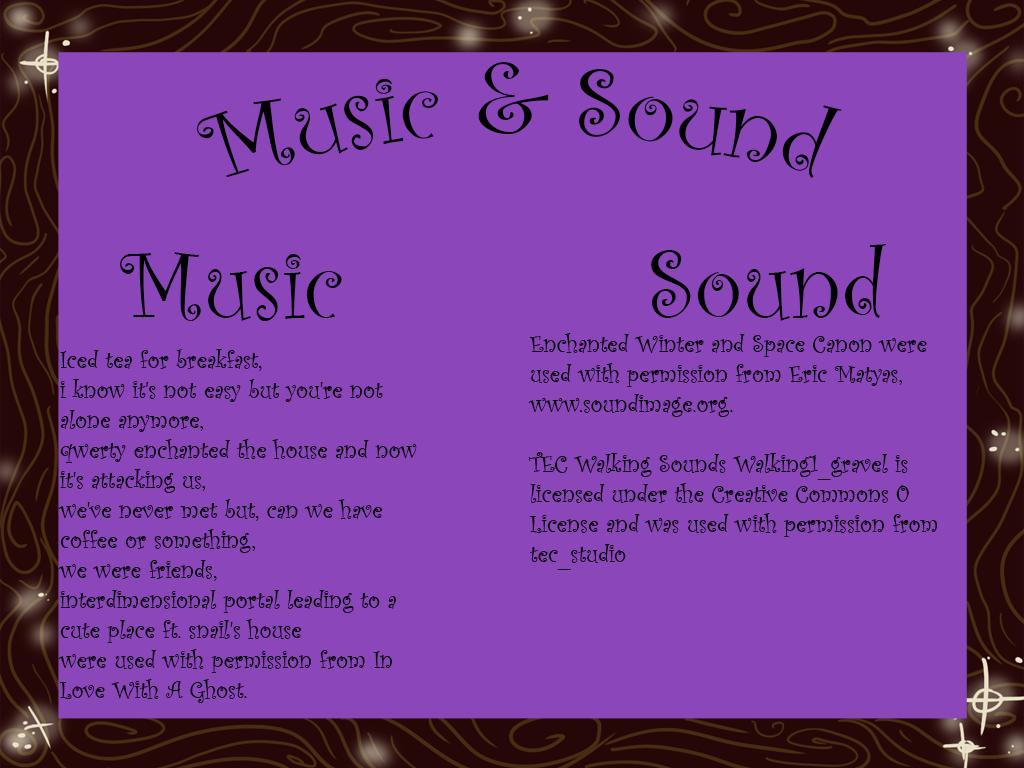
<style>
.page{position:relative;width:1024px;height:768px;background:#8b47ba}
.page>*{position:absolute;margin:0}
.t1{font:100px "CurlzMT";color:#000000}
.t2{font:25px "CurlzMT";color:#000000}
</style>
<div class="page">
<p class="t1" style="left:196px;top:62px;width:646px;height:116px">Music &amp; Sound</p>
<p class="t1" style="left:651px;top:244px;width:236px;height:77px">Sound</p>
<p class="t1" style="left:120px;top:252px;width:222px;height:69px">Music</p>
<p class="t2" style="left:528px;top:333px;width:409px;height:237px">Enchanted Winter and Space Canon were used with permission from Eric Matyas, www.soundimage.org.<br><br>TEC Walking Sounds Walking1_gravel is licensed under the Creative Commons 0 License and was used with permission from tec_studio</p>
<p class="t2" style="left:58px;top:349px;width:359px;height:354px">Iced tea for breakfast, <br>i know it's not easy but you're not alone anymore, <br>qwerty enchanted the house and now it's attacking us,  <br>we've never met but, can we have coffee or something, <br>we were friends, <br>interdimensional portal leading to a cute place ft. snail's house <br>were used with permission from In Love With A Ghost.</p>
</div>
